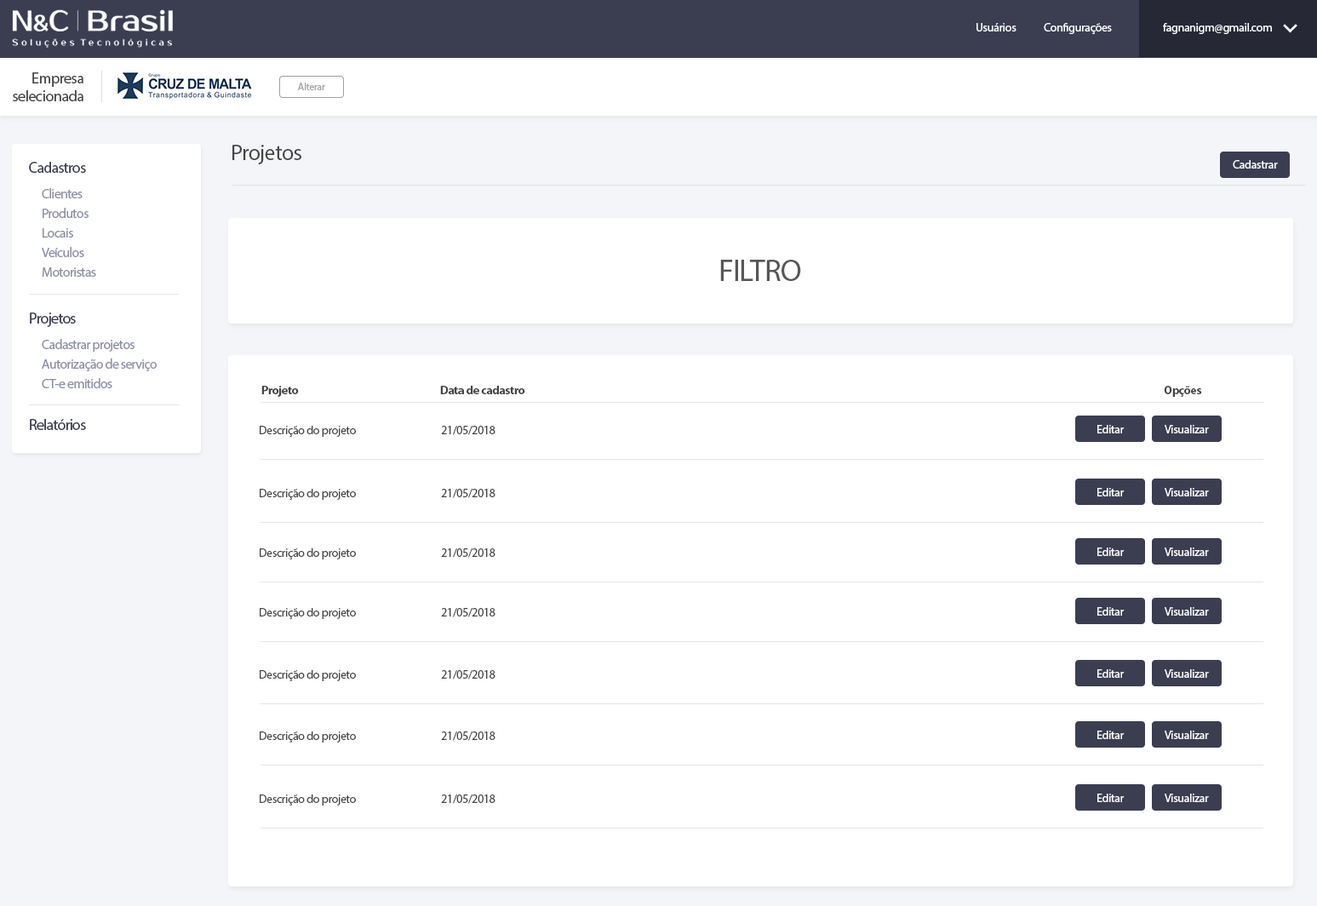
<style>
.page{position:relative;width:1317px;height:906px;background:#ffffff}
.page>*{position:absolute;margin:0}
.t1{font:11.9px "MyriadPro-Regular";letter-spacing:-0.025em;color:#ffffff}
.t2{font:15.3px/17.8px "MyriadPro-Regular";letter-spacing:-0.025em;color:#454545}
.t3{font:10.2px "MyriadPro-Regular";letter-spacing:-0.025em;color:#a2a2a2}
.t4{font:22.1px "MyriadPro-Regular";letter-spacing:-0.025em;color:#454545}
.t5{font:15.3px "MyriadPro-Regular";letter-spacing:-0.045em;color:#3b3e51}
.t6{font:13.6px "MyriadPro-Regular";letter-spacing:-0.045em;color:#8c8fa4}
.t7{font:30.6px "MyriadPro-Regular";letter-spacing:-0.025em;color:#575757}
.t8{font:13.6px "MyriadPro-Regular";letter-spacing:-0.045em;color:#8d90a5}
.t9{font:11.9px "MyriadPro-Bold";letter-spacing:-0.025em;color:#454545}
.t10{font:11.9px "MyriadPro-Regular";letter-spacing:-0.025em;color:#454545}
</style>
<div class="page">
<p class="t1" style="left:976px;top:23px;width:40px;height:8px">Usuários</p>
<p class="t1" style="left:1043px;top:23px;width:69px;height:11px">Configurações</p>
<p class="t1" style="left:1163px;top:23px;width:109px;height:11px">fagnanigm@gmail.com</p>
<p class="t2" style="left:13px;top:72px;width:70px;height:29px;text-align:right">Empresa<br>selecionada</p>
<p class="t3" style="left:298px;top:83px;width:27px;height:7px">Alterar</p>
<p class="t4" style="left:232px;top:145px;width:69px;height:19px">Projetos</p>
<p class="t5" style="left:29px;top:162px;width:57px;height:11px">Cadastros</p>
<p class="t1" style="left:1232px;top:160px;width:46px;height:9px">Cadastrar</p>
<p class="t6" style="left:42px;top:188px;width:41px;height:10px">Clientes</p>
<p class="t6" style="left:43px;top:208px;width:46px;height:10px">Produtos</p>
<p class="t6" style="left:43px;top:228px;width:30px;height:9px">Locais</p>
<p class="t6" style="left:42px;top:247px;width:42px;height:10px">Veículos</p>
<p class="t6" style="left:42px;top:267px;width:54px;height:10px">Motoristas</p>
<p class="t7" style="left:720px;top:260px;width:81px;height:21px">FILTRO</p>
<p class="t5" style="left:30px;top:312px;width:46px;height:15px">Projetos</p>
<p class="t6" style="left:42px;top:339px;width:92px;height:13px">Cadastrar projetos</p>
<p class="t8" style="left:42px;top:358px;width:115px;height:13px">Autorização de serviço</p>
<p class="t6" style="left:42px;top:378px;width:70px;height:10px">CT-e emitidos</p>
<p class="t9" style="left:261px;top:386px;width:38px;height:11px">Projeto</p>
<p class="t9" style="left:440px;top:386px;width:85px;height:8px">Data de cadastro</p>
<p class="t9" style="left:1164px;top:386px;width:38px;height:11px">Opções</p>
<p class="t5" style="left:30px;top:419px;width:56px;height:11px">Relatórios</p>
<p class="t10" style="left:260px;top:426px;width:96px;height:11px">Descrição do projeto</p>
<p class="t10" style="left:441px;top:426px;width:54px;height:9px">21/05/2018</p>
<p class="t1" style="left:1097px;top:425px;width:27px;height:8px">Editar</p>
<p class="t1" style="left:1164px;top:425px;width:45px;height:8px">Visualizar</p>
<p class="t10" style="left:260px;top:489px;width:96px;height:11px">Descrição do projeto</p>
<p class="t10" style="left:441px;top:489px;width:54px;height:9px">21/05/2018</p>
<p class="t1" style="left:1097px;top:488px;width:27px;height:8px">Editar</p>
<p class="t1" style="left:1164px;top:488px;width:45px;height:8px">Visualizar</p>
<p class="t10" style="left:260px;top:548px;width:96px;height:11px">Descrição do projeto</p>
<p class="t10" style="left:441px;top:548px;width:54px;height:9px">21/05/2018</p>
<p class="t1" style="left:1097px;top:547px;width:27px;height:9px">Editar</p>
<p class="t1" style="left:1164px;top:547px;width:45px;height:9px">Visualizar</p>
<p class="t10" style="left:260px;top:608px;width:96px;height:11px">Descrição do projeto</p>
<p class="t10" style="left:441px;top:608px;width:54px;height:9px">21/05/2018</p>
<p class="t1" style="left:1097px;top:607px;width:27px;height:8px">Editar</p>
<p class="t1" style="left:1164px;top:607px;width:45px;height:8px">Visualizar</p>
<p class="t10" style="left:260px;top:670px;width:96px;height:11px">Descrição do projeto</p>
<p class="t10" style="left:441px;top:670px;width:54px;height:9px">21/05/2018</p>
<p class="t1" style="left:1097px;top:669px;width:27px;height:9px">Editar</p>
<p class="t1" style="left:1164px;top:669px;width:45px;height:9px">Visualizar</p>
<p class="t10" style="left:260px;top:731px;width:96px;height:11px">Descrição do projeto</p>
<p class="t10" style="left:441px;top:731px;width:54px;height:9px">21/05/2018</p>
<p class="t1" style="left:1097px;top:730px;width:27px;height:9px">Editar</p>
<p class="t1" style="left:1164px;top:730px;width:45px;height:9px">Visualizar</p>
<p class="t10" style="left:260px;top:794px;width:96px;height:11px">Descrição do projeto</p>
<p class="t10" style="left:441px;top:794px;width:54px;height:9px">21/05/2018</p>
<p class="t1" style="left:1097px;top:793px;width:27px;height:9px">Editar</p>
<p class="t1" style="left:1164px;top:793px;width:45px;height:9px">Visualizar</p>
</div>
